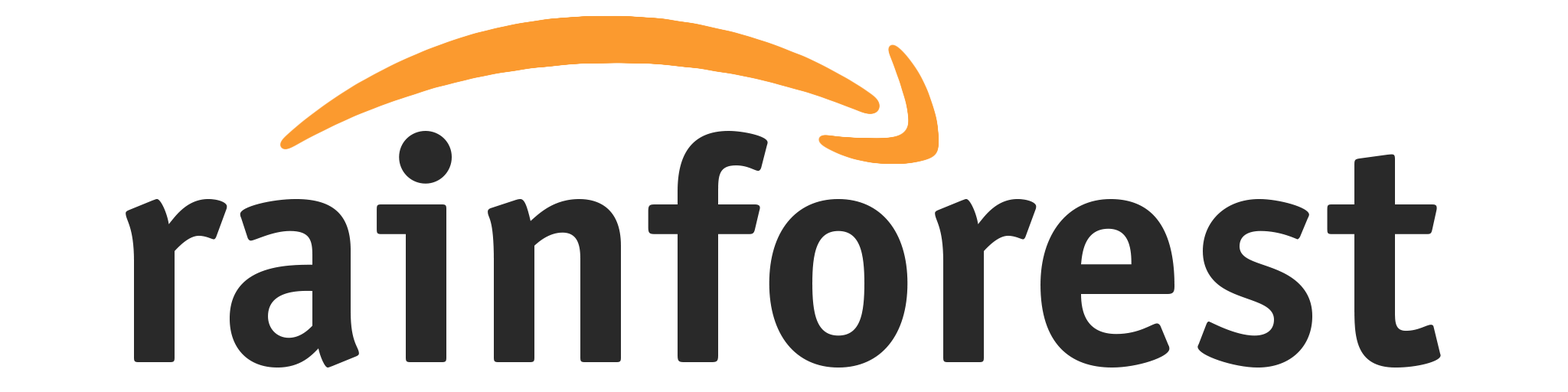
<style>
.page{position:relative;width:1568px;height:392px;background:#ffffff}
.page>*{position:absolute;margin:0}
.t1{font:319px "OfficinaSansStd-Bold";color:#292929}
</style>
<div class="page">
<p class="t1" style="left:126px;top:131px;width:1315px;height:237px">rainforest</p>
</div>
